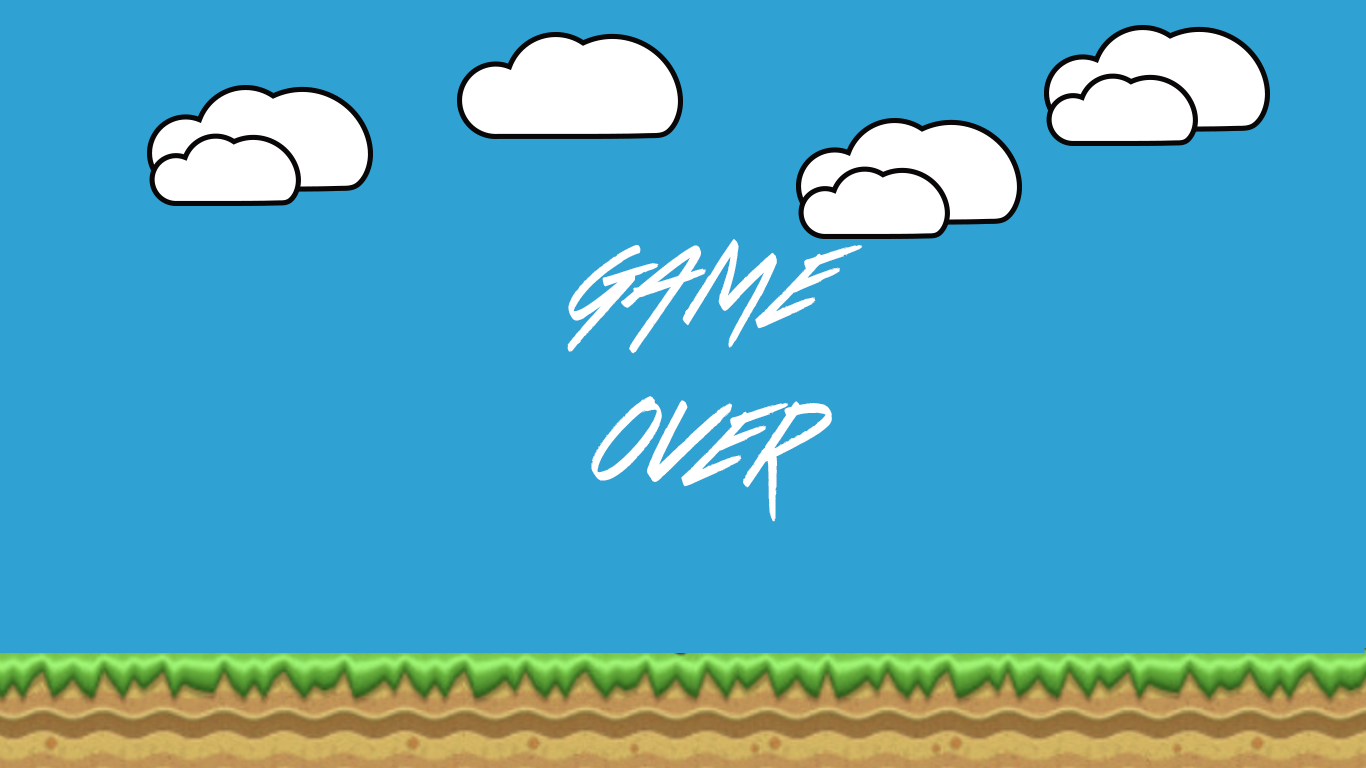
<style>
.page{position:relative;width:1366px;height:768px;background:#30a1d3}
.page>*{position:absolute;margin:0}
.t1{font:90px "DancingontheBeach";letter-spacing:0.1em;color:#ffffff}
</style>
<div class="page">
<p class="t1" style="left:567px;top:239px;width:296px;height:283px;text-align:center">GAME<br>OVER</p>
</div>
